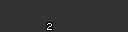
<style>
.page{position:relative;width:128px;height:32px;background:#333333}
.page>*{position:absolute;margin:0}
.t1{font:10px "Terminal";color:#ffffff}
</style>
<div class="page">
<p class="t1" style="left:47px;top:23px;width:5px;height:7px">2</p>
</div>
